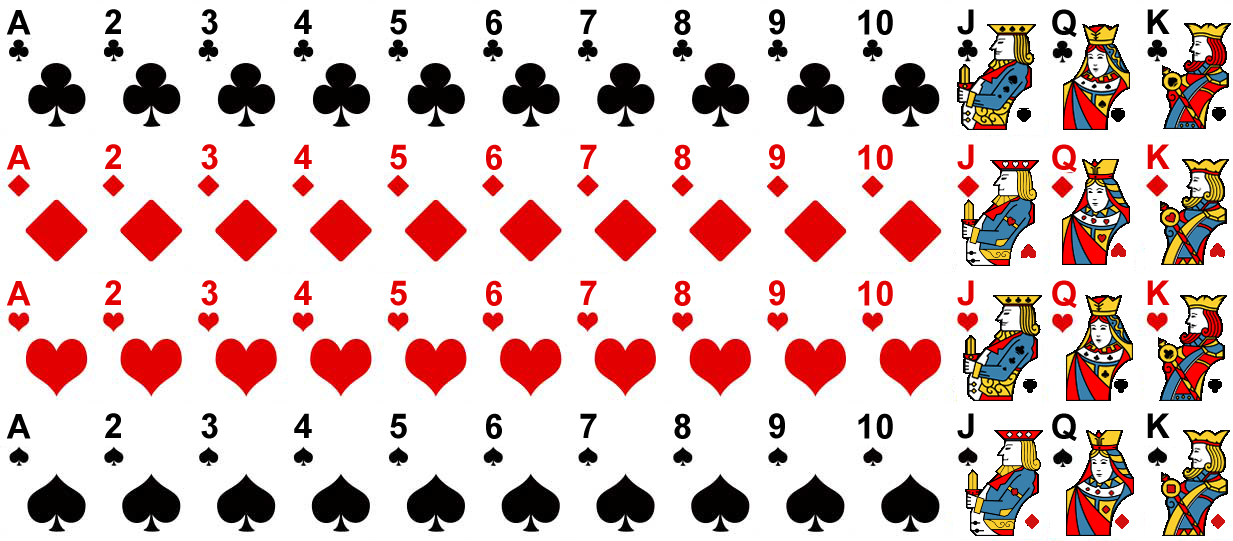
<style>
.page{position:relative;width:1233px;height:541px;background:#ffffff}
.page>*{position:absolute;margin:0}
.t1{font:34px "Arial-BoldMT";letter-spacing:0.02em;color:#000000}
.t2{font:34px "Arial-BoldMT";letter-spacing:0.02em;color:#e20001}
.t3{font:34px "Arial-BoldMT";letter-spacing:0.02em;color:#e20200}
</style>
<div class="page">
<p class="t1" style="left:6px;top:10px;width:25px;height:25px">A</p>
<p class="t1" style="left:105px;top:9px;width:16px;height:25px">2</p>
<p class="t1" style="left:201px;top:9px;width:17px;height:26px">3</p>
<p class="t1" style="left:294px;top:9px;width:18px;height:25px">4</p>
<p class="t1" style="left:390px;top:9px;width:17px;height:26px">5</p>
<p class="t1" style="left:486px;top:9px;width:16px;height:26px">6</p>
<p class="t1" style="left:580px;top:9px;width:17px;height:25px">7</p>
<p class="t1" style="left:674px;top:9px;width:17px;height:26px">8</p>
<p class="t1" style="left:769px;top:9px;width:16px;height:26px">9</p>
<p class="t1" style="left:858px;top:9px;width:35px;height:26px">10</p>
<p class="t1" style="left:957px;top:9px;width:17px;height:26px">J</p>
<p class="t1" style="left:1052px;top:9px;width:25px;height:28px">Q</p>
<p class="t1" style="left:1147px;top:9px;width:23px;height:25px">K</p>
<p class="t2" style="left:6px;top:145px;width:25px;height:25px">A</p>
<p class="t2" style="left:105px;top:144px;width:16px;height:25px">2</p>
<p class="t2" style="left:201px;top:144px;width:17px;height:26px">3</p>
<p class="t2" style="left:294px;top:144px;width:18px;height:25px">4</p>
<p class="t2" style="left:390px;top:144px;width:17px;height:26px">5</p>
<p class="t2" style="left:486px;top:144px;width:16px;height:26px">6</p>
<p class="t2" style="left:580px;top:144px;width:17px;height:25px">7</p>
<p class="t2" style="left:674px;top:144px;width:17px;height:26px">8</p>
<p class="t2" style="left:769px;top:144px;width:16px;height:26px">9</p>
<p class="t3" style="left:858px;top:144px;width:35px;height:26px">10</p>
<p class="t2" style="left:957px;top:144px;width:17px;height:26px">J</p>
<p class="t2" style="left:1052px;top:144px;width:25px;height:28px">Q</p>
<p class="t2" style="left:1147px;top:144px;width:23px;height:25px">K</p>
<p class="t2" style="left:6px;top:281px;width:25px;height:25px">A</p>
<p class="t2" style="left:105px;top:280px;width:16px;height:25px">2</p>
<p class="t2" style="left:201px;top:280px;width:17px;height:26px">3</p>
<p class="t2" style="left:294px;top:280px;width:18px;height:25px">4</p>
<p class="t2" style="left:390px;top:280px;width:17px;height:26px">5</p>
<p class="t2" style="left:486px;top:280px;width:16px;height:26px">6</p>
<p class="t2" style="left:580px;top:280px;width:17px;height:25px">7</p>
<p class="t2" style="left:674px;top:280px;width:17px;height:26px">8</p>
<p class="t2" style="left:769px;top:280px;width:16px;height:26px">9</p>
<p class="t3" style="left:858px;top:280px;width:35px;height:26px">10</p>
<p class="t2" style="left:957px;top:280px;width:17px;height:26px">J</p>
<p class="t2" style="left:1052px;top:280px;width:25px;height:28px">Q</p>
<p class="t2" style="left:1147px;top:280px;width:23px;height:25px">K</p>
<p class="t1" style="left:6px;top:414px;width:25px;height:25px">A</p>
<p class="t1" style="left:105px;top:413px;width:16px;height:25px">2</p>
<p class="t1" style="left:201px;top:413px;width:17px;height:26px">3</p>
<p class="t1" style="left:294px;top:413px;width:18px;height:25px">4</p>
<p class="t1" style="left:390px;top:413px;width:17px;height:26px">5</p>
<p class="t1" style="left:486px;top:413px;width:16px;height:26px">6</p>
<p class="t1" style="left:580px;top:413px;width:17px;height:25px">7</p>
<p class="t1" style="left:674px;top:413px;width:17px;height:26px">8</p>
<p class="t1" style="left:769px;top:413px;width:16px;height:26px">9</p>
<p class="t1" style="left:858px;top:413px;width:35px;height:26px">10</p>
<p class="t1" style="left:957px;top:413px;width:17px;height:26px">J</p>
<p class="t1" style="left:1052px;top:413px;width:25px;height:28px">Q</p>
<p class="t1" style="left:1147px;top:413px;width:23px;height:25px">K</p>
</div>
